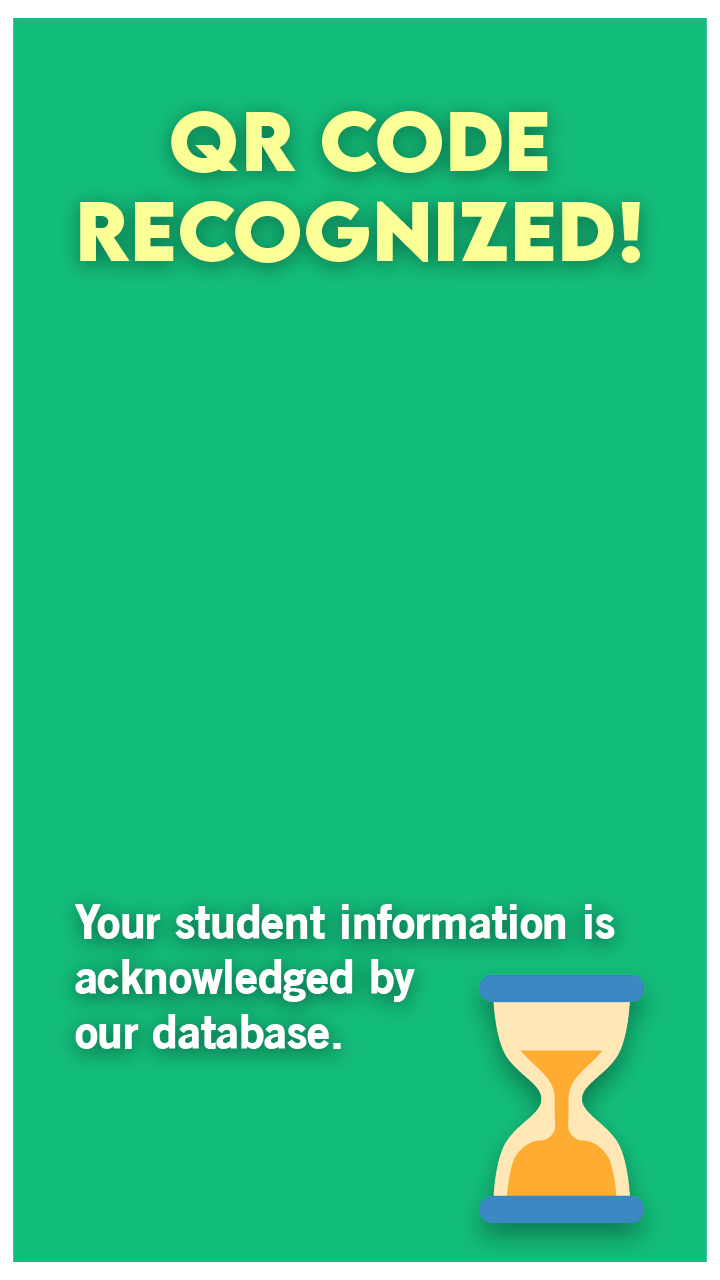
<style>
.page{position:relative;width:720px;height:1280px;background:#13bd7b}
.page>*{position:absolute;margin:0}
.t1{font:75px "LEMONMILK-Bold";color:#fbff95}
.t2{font:45.8px "OldSansBlack";color:#ffffff}
</style>
<div class="page">
<p class="t1" style="left:80px;top:111px;width:560px;height:152px;text-align:center">qR CODE<br>RECOGNIZED!</p>
<p class="t2" style="left:74px;top:904px;width:541px;height:145px">Your student information is acknowledged by<br>our database.</p>
</div>
